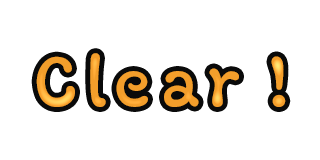
<style>
.page{position:relative;width:320px;height:160px;background:#ffffff}
.page>*{position:absolute;margin:0}
.t1{font:72px "MoolongChocolate-Regular";letter-spacing:0.075em;color:#f39e2b}
</style>
<div class="page">
<p class="t1" style="left:36px;top:53px;width:250px;height:54px">Clear！</p>
</div>
